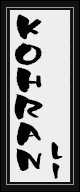
<style>
.page{position:relative;width:80px;height:192px;background:#eeeeee}
.page>*{position:absolute;margin:0}
.t1{font:40px/26.7px "YAKITORI";color:#000000;scale:1.3 1}
.t2{font:26.7px/18.7px "YAKITORI";color:#000000}
.t3{font:26.7px/20px "YAKITORI";color:#000000}
</style>
<div class="page">
<p class="t1" style="left:14px;top:14px;width:29px;height:157px;text-align:center">K<br>O<br>H<br>R<br>A<br>N</p>
<p class="t2" style="left:51px;top:142px;width:12px;height:37px;text-align:center">L<br><span class="t3">I</span></p>
</div>
